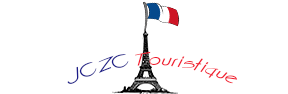
<style>
.page{position:relative;width:288px;height:94px;background:#ffffff}
.page>*{position:absolute;margin:0}
.t1{font:16px "CountryBlueprint";color:#f11a2e}
.t2{font:16px "CountryBlueprint";color:#1c1c8a}
</style>
<div class="page">
<p class="t1" style="left:67px;top:51px;width:171px;height:33px;text-align:center"><span class="t2">JCZC </span>Touristique</p>
</div>
